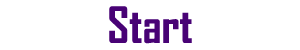
<style>
.page{position:relative;width:300px;height:50px;background:#ffffff}
.page>*{position:absolute;margin:0}
.t1{font:48px "AgencyFB-Bold";color:#480275}
</style>
<div class="page">
<p class="t1" style="left:109px;top:6px;width:83px;height:38px">Start</p>
</div>
